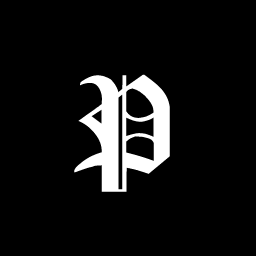
<style>
.page{position:relative;width:256px;height:256px;background:#000000}
.page>*{position:absolute;margin:0}
.t1{font:142px "CloisterBlack-Light";color:#ffffff}
</style>
<div class="page">
<p class="t1" style="left:74px;top:74px;width:96px;height:118px">P</p>
</div>
